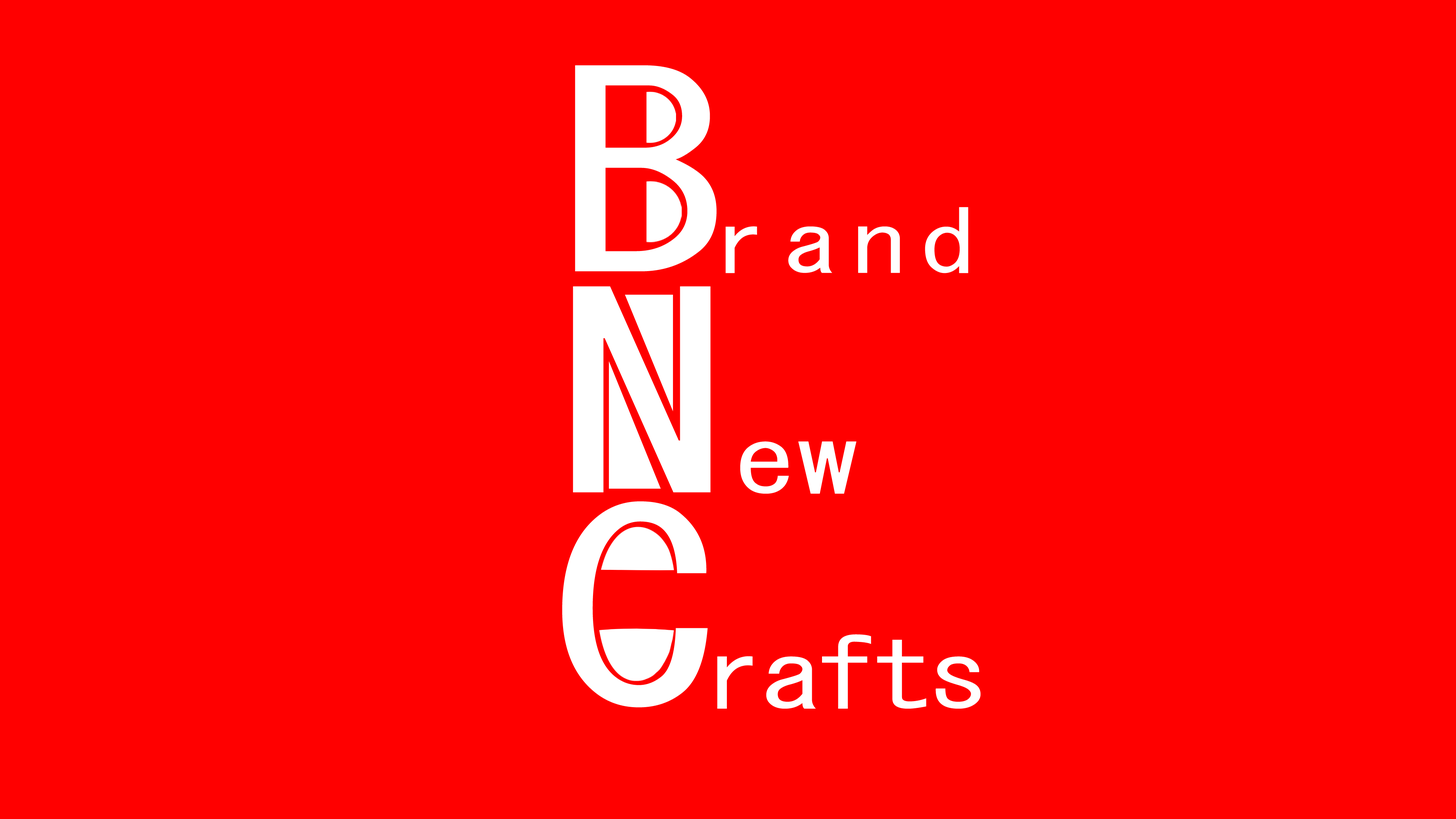
<style>
.page{position:relative;width:1456px;height:819px;background:#ff0000}
.page>*{position:absolute;margin:0}
.t1{font:85.9px "MS-Gothic";letter-spacing:0.14em;color:#ffffff;scale:1.25 1}
.t2{font:270.5px "MS-Gothic";letter-spacing:-0.04em;color:#ffffff;scale:1.25 1}
.t3{font:97.3px "MS-Gothic";letter-spacing:0.02em;color:#ffffff;scale:1.25 1}
.t4{font:270.5px "MS-Gothic";letter-spacing:0.02em;color:#ffffff;scale:1.25 1}
.t5{font:97.3px "MS-Gothic";letter-spacing:-0.04em;color:#ffffff;scale:1.25 1}
</style>
<div class="page">
<p class="t1" style="left:575px;top:65px;width:393px;height:208px"><span class="t2">B</span>rand</p>
<p class="t3" style="left:573px;top:286px;width:284px;height:208px"><span class="t4">N</span>ew</p>
<p class="t5" style="left:562px;top:501px;width:419px;height:208px"><span class="t2">C</span>rafts</p>
</div>
